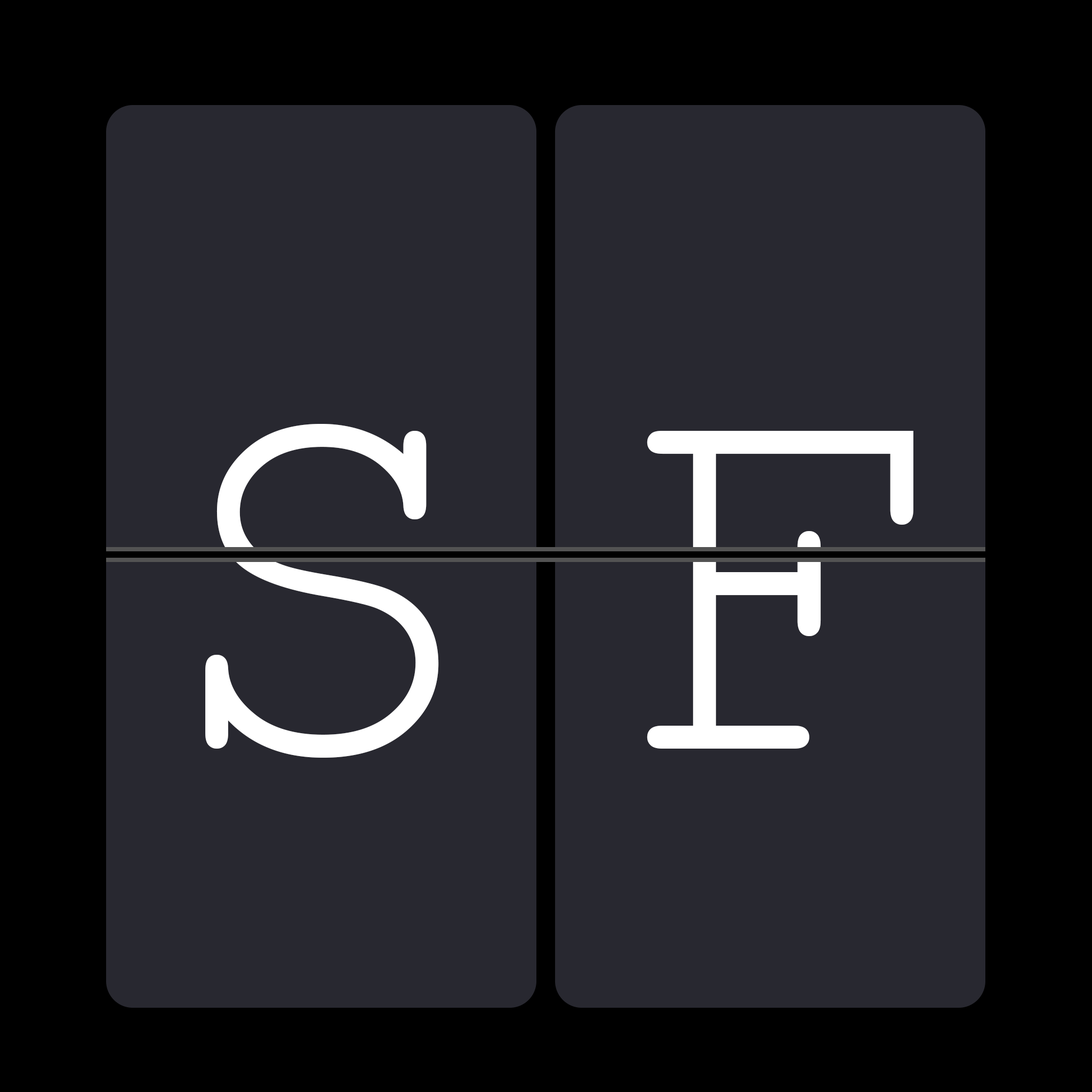
<style>
.page{position:relative;width:1092px;height:1092px;background:#282830}
.page>*{position:absolute;margin:0}
.t1{font:555.4px "CourierNewPSMT";color:#ffffff}
</style>
<div class="page">
<p class="t1" style="left:205px;top:424px;width:234px;height:334px">S</p>
<p class="t1" style="left:647px;top:431px;width:266px;height:318px">F</p>
</div>
